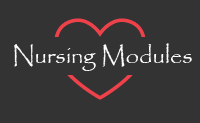
<style>
.page{position:relative;width:200px;height:123px;background:#333333}
.page>*{position:absolute;margin:0}
.t1{font:24px "Papyrus-Regular";color:#ffffff}
</style>
<div class="page">
<p class="t1" style="left:14px;top:43px;width:178px;height:28px">Nursing Modules</p>
</div>
